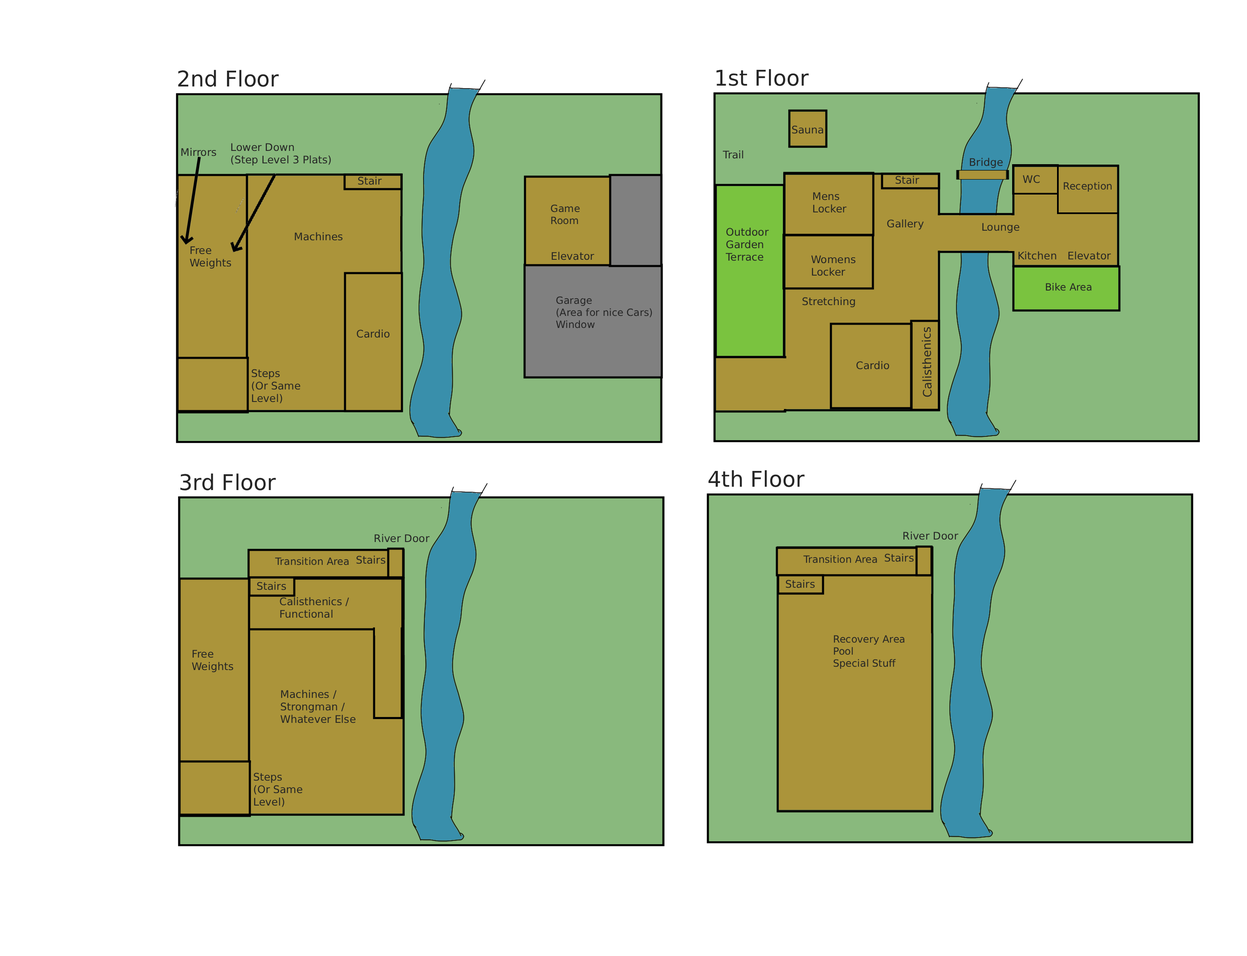
<style>
.page{position:relative;width:1247px;height:956px;background:#ffffff}
.page>*{position:absolute;margin:0}
.t1{font:21.7px "DejaVuSans";color:#252525}
.t2{font:10.5px "DejaVuSans";color:#252525}
.t3{font:10px "DejaVuSans";color:#252525}
.t4{font:11.8px "DejaVuSans";color:#252525}
</style>
<div class="page">
<p class="t1" style="left:178px;top:70px;width:101px;height:17px">2nd Floor</p>
<p class="t1" style="left:716px;top:69px;width:93px;height:17px">1st Floor</p>
<p class="t2" style="left:792px;top:126px;width:32px;height:8px">Sauna</p>
<p class="t2" style="left:181px;top:148px;width:35px;height:8px">Mirrors</p>
<p class="t2" style="left:231px;top:143px;width:100px;height:23px">Lower Down<br>(Step Level 3 Plats)</p>
<p class="t2" style="left:723px;top:150px;width:20px;height:9px">Trail</p>
<p class="t2" style="left:970px;top:158px;width:33px;height:10px">Bridge</p>
<p class="t2" style="left:358px;top:176px;width:24px;height:9px">Stair</p>
<p class="t2" style="left:895px;top:175px;width:25px;height:9px">Stair</p>
<p class="t2" style="left:1023px;top:175px;width:17px;height:8px">WC</p>
<p class="t3" style="left:1064px;top:182px;width:48px;height:10px">Reception</p>
<p class="t2" style="left:813px;top:192px;width:34px;height:21px">Mens<br>Locker</p>
<p class="t3" style="left:551px;top:205px;width:29px;height:19px">Game <br>Room</p>
<p class="t2" style="left:887px;top:219px;width:37px;height:11px">Gallery</p>
<p class="t2" style="left:295px;top:232px;width:48px;height:9px">Machines</p>
<p class="t2" style="left:725px;top:227px;width:44px;height:34px">Outdoor<br>Garden<br>Terrace</p>
<p class="t2" style="left:982px;top:223px;width:38px;height:10px">Lounge</p>
<p class="t2" style="left:190px;top:246px;width:41px;height:23px">Free<br>Weights</p>
<p class="t2" style="left:552px;top:252px;width:42px;height:8px">Elevator</p>
<p class="t2" style="left:811px;top:255px;width:45px;height:21px">Womens<br>Locker</p>
<p class="t2" style="left:1018px;top:251px;width:38px;height:9px">Kitchen</p>
<p class="t2" style="left:1068px;top:251px;width:43px;height:9px">Elevator</p>
<p class="t3" style="left:1046px;top:283px;width:46px;height:8px">Bike Area</p>
<p class="t3" style="left:556px;top:296px;width:96px;height:32px">Garage<br>(Area for nice Cars)<br>Window</p>
<p class="t2" style="left:802px;top:297px;width:53px;height:11px">Stretching</p>
<p class="t2" style="left:357px;top:329px;width:33px;height:9px">Cardio</p>
<p class="t4" style="left:922px;top:327px;width:10px;height:70px;rotate:-91deg">Calisthenics</p>
<p class="t2" style="left:856px;top:361px;width:34px;height:9px">Cardio</p>
<p class="t2" style="left:252px;top:369px;width:49px;height:35px">Steps <br>(Or Same <br>Level)</p>
<p class="t1" style="left:180px;top:473px;width:96px;height:18px">3rd Floor</p>
<p class="t1" style="left:708px;top:470px;width:97px;height:17px">4th Floor</p>
<p class="t2" style="left:375px;top:534px;width:55px;height:9px">River Door</p>
<p class="t2" style="left:903px;top:531px;width:56px;height:9px">River Door</p>
<p class="t3" style="left:275px;top:557px;width:74px;height:8px">Transition Area</p>
<p class="t2" style="left:356px;top:555px;width:29px;height:9px">Stairs</p>
<p class="t3" style="left:803px;top:555px;width:74px;height:8px">Transition Area</p>
<p class="t2" style="left:885px;top:553px;width:29px;height:9px">Stairs</p>
<p class="t2" style="left:257px;top:582px;width:29px;height:8px">Stairs</p>
<p class="t2" style="left:786px;top:580px;width:29px;height:8px">Stairs</p>
<p class="t2" style="left:280px;top:597px;width:69px;height:21px">Calisthenics / <br>Functional</p>
<p class="t3" style="left:834px;top:635px;width:71px;height:34px">Recovery Area<br>Pool<br>Special Stuff</p>
<p class="t2" style="left:192px;top:650px;width:41px;height:23px">Free<br>Weights</p>
<p class="t2" style="left:280px;top:690px;width:76px;height:33px">Machines /<br>Strongman /<br>Whatever Else</p>
<p class="t2" style="left:254px;top:773px;width:49px;height:34px">Steps <br>(Or Same <br>Level)</p>
</div>
